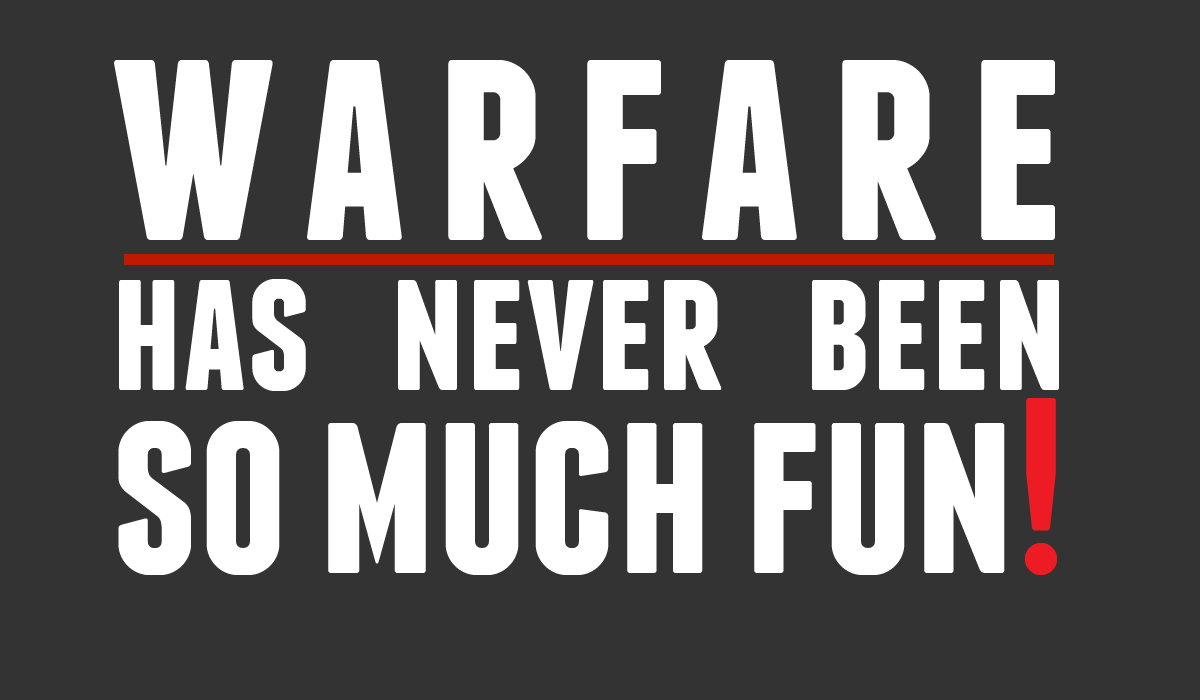
<style>
.page{position:relative;width:1200px;height:700px;background:#333333}
.page>*{position:absolute;margin:0}
.t1{font:183.3px/150px "Franchise-Bold";color:#ffffff}
.t2{font:300px/183.3px "Franchise-Bold";color:#ffffff}
.t3{font:250px/183.3px "Franchise-Bold";color:#ffffff}
.t4{font:250px/183.3px "Franchise-Bold";color:#ed1c24}
</style>
<div class="page">
<p class="t1" style="left:114px;top:60px;width:945px;height:515px;text-align:justify"><span class="t2">warfare<br></span>has never been<br><span class="t3">so much fun</span><span class="t4">!</span></p>
</div>
